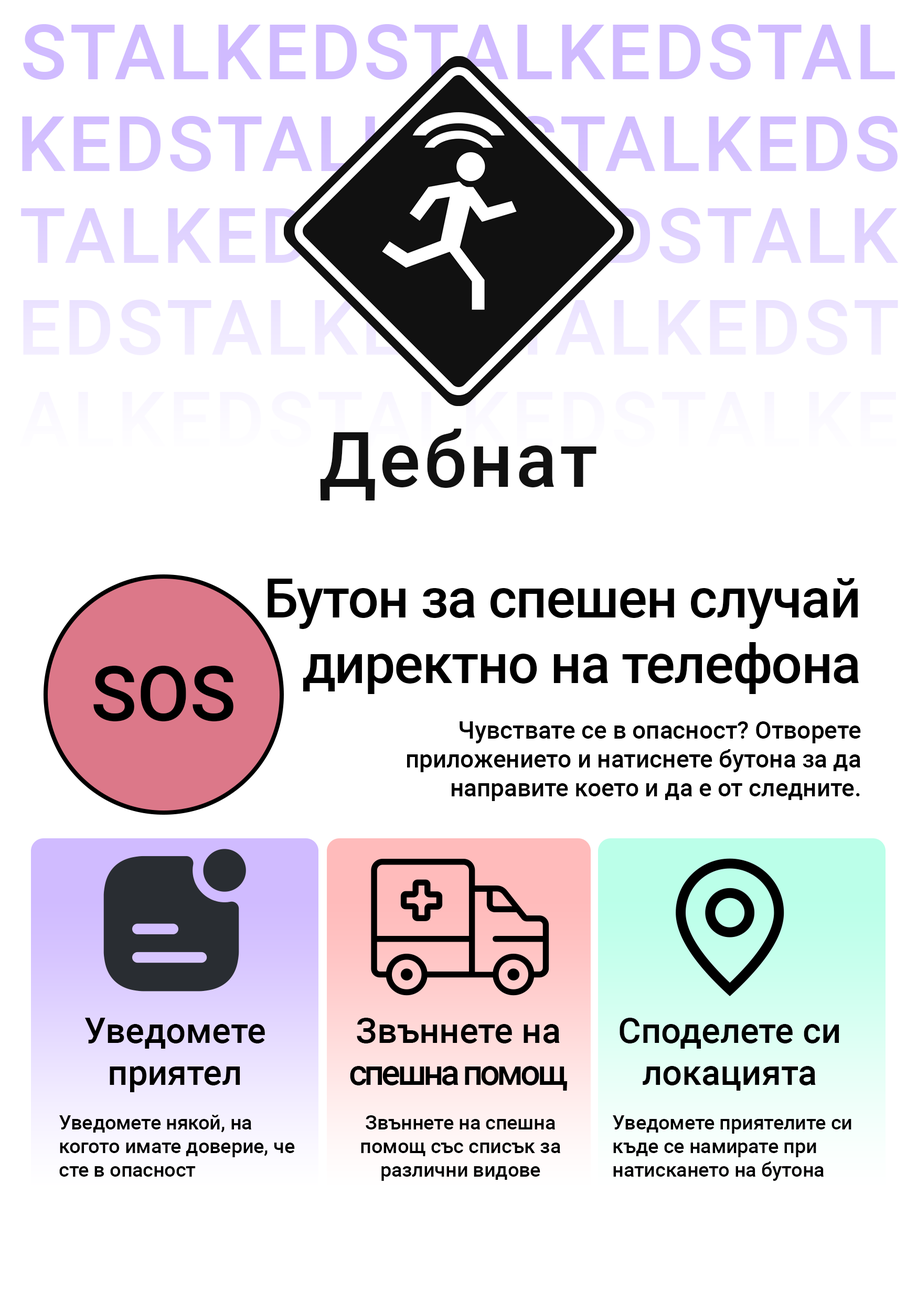
<style>
.page{position:relative;width:917px;height:1301px;background:#ffffff}
.page>*{position:absolute;margin:0}
.t1{font:76.5px "Roboto-Medium";letter-spacing:0.04em;color:#111111}
.t2{font:54.6px "Roboto-Medium";letter-spacing:-0.02em;color:#000000}
.t3{font:76.5px "Roboto-Medium";color:#000000}
.t4{font:24px "Roboto-Medium";color:#000000}
.t5{font:35px "Roboto-Medium";color:#000000}
.t6{font:35px "Roboto-Medium";letter-spacing:-0.08em;color:#000000}
.t7{font:19.7px "Roboto-Medium";color:#000000}
</style>
<div class="page">
<p class="t1" style="left:320px;top:428px;width:276px;height:72px">Дебнат</p>
<p class="t2" style="left:267px;top:578px;width:592px;height:116px;text-align:right">Бутон за спешен случай директно на телефона</p>
<p class="t3" style="left:93px;top:666px;width:140px;height:55px">SOS</p>
<p class="t4" style="left:407px;top:721px;width:454px;height:80px;text-align:right">Чувствате се в опасност? Отворете приложението и натиснете бутона за да направите което и да е от следните.</p>
<p class="t5" style="left:84px;top:1017px;width:181px;height:75px;text-align:center">Уведомете приятел</p>
<p class="t6" style="left:350px;top:1017px;width:217px;height:73px;text-align:center"><span class="t5">Звъннете на </span>спешна помощ</p>
<p class="t5" style="left:619px;top:1017px;width:220px;height:73px;text-align:center">Споделете си локацията</p>
<p class="t7" style="left:59px;top:1114px;width:236px;height:62px">Уведомете някой, на когото имате доверие, че сте в опасност</p>
<p class="t7" style="left:361px;top:1115px;width:199px;height:66px;text-align:center">Звъннете на спешна помощ със списък за различни видове</p>
<p class="t7" style="left:613px;top:1115px;width:238px;height:66px">Уведомете приятелите си къде се намирате при натискането на бутона</p>
</div>
